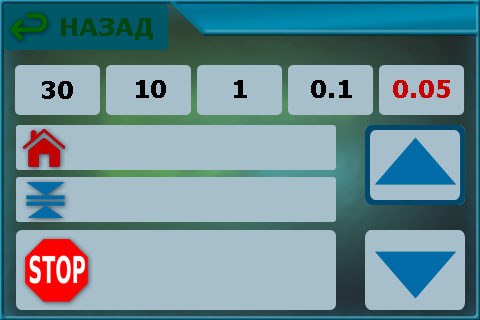
<style>
.page{position:relative;width:480px;height:320px;background:#a6bfcb}
.page>*{position:absolute;margin:0}
.t1{font:24px "Verdana-Bold";color:#004612}
.t2{font:24px "Verdana-Bold";color:#000000}
.t3{font:24px "Verdana-Bold";color:#c90000}
</style>
<div class="page">
<p class="t1" style="left:61px;top:18px;width:92px;height:22px">НАЗАД</p>
<p class="t2" style="left:42px;top:81px;width:31px;height:18px">30</p>
<p class="t2" style="left:136px;top:80px;width:30px;height:18px">10</p>
<p class="t2" style="left:234px;top:80px;width:13px;height:18px">1</p>
<p class="t2" style="left:311px;top:80px;width:41px;height:18px">0.1</p>
<p class="t3" style="left:393px;top:80px;width:57px;height:18px">0.05</p>
</div>
